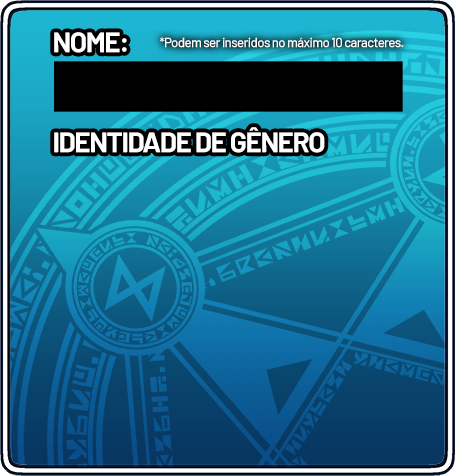
<style>
.page{position:relative;width:455px;height:476px}
.page>*{position:absolute;margin:0}
.t1{font:28px "Barlow-Bold";letter-spacing:-0.05em;color:#ffffff}
.t2{font:13.3px "Barlow-Medium";letter-spacing:-0.05em;color:#ffffff}
</style>
<div class="page">
<p class="t1" style="left:54px;top:32px;width:73px;height:21px">NOME:</p>
<p class="t2" style="left:160px;top:37px;width:244px;height:11px">*Podem ser inseridos no máximo 10 caracteres.</p>
<p class="t1" style="left:54px;top:127px;width:271px;height:26px">IDENTIDADE DE GÊNERO</p>
</div>
